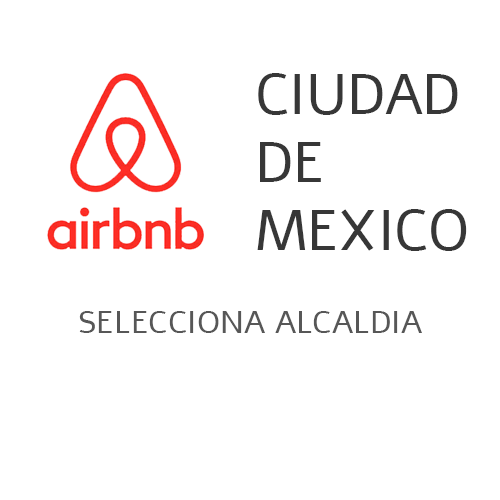
<style>
.page{position:relative;width:500px;height:500px;background:#ffffff}
.page>*{position:absolute;margin:0}
.t1{font:56.5px "Alef-Regular";color:#373737}
.t2{font:32.2px "Alef-Regular";color:#575757}
</style>
<div class="page">
<p class="t1" style="left:257px;top:73px;width:210px;height:178px">CIUDAD<br>DE<br>MEXICO</p>
<p class="t2" style="left:79px;top:311px;width:343px;height:22px">SELECCIONA ALCALDIA</p>
</div>
